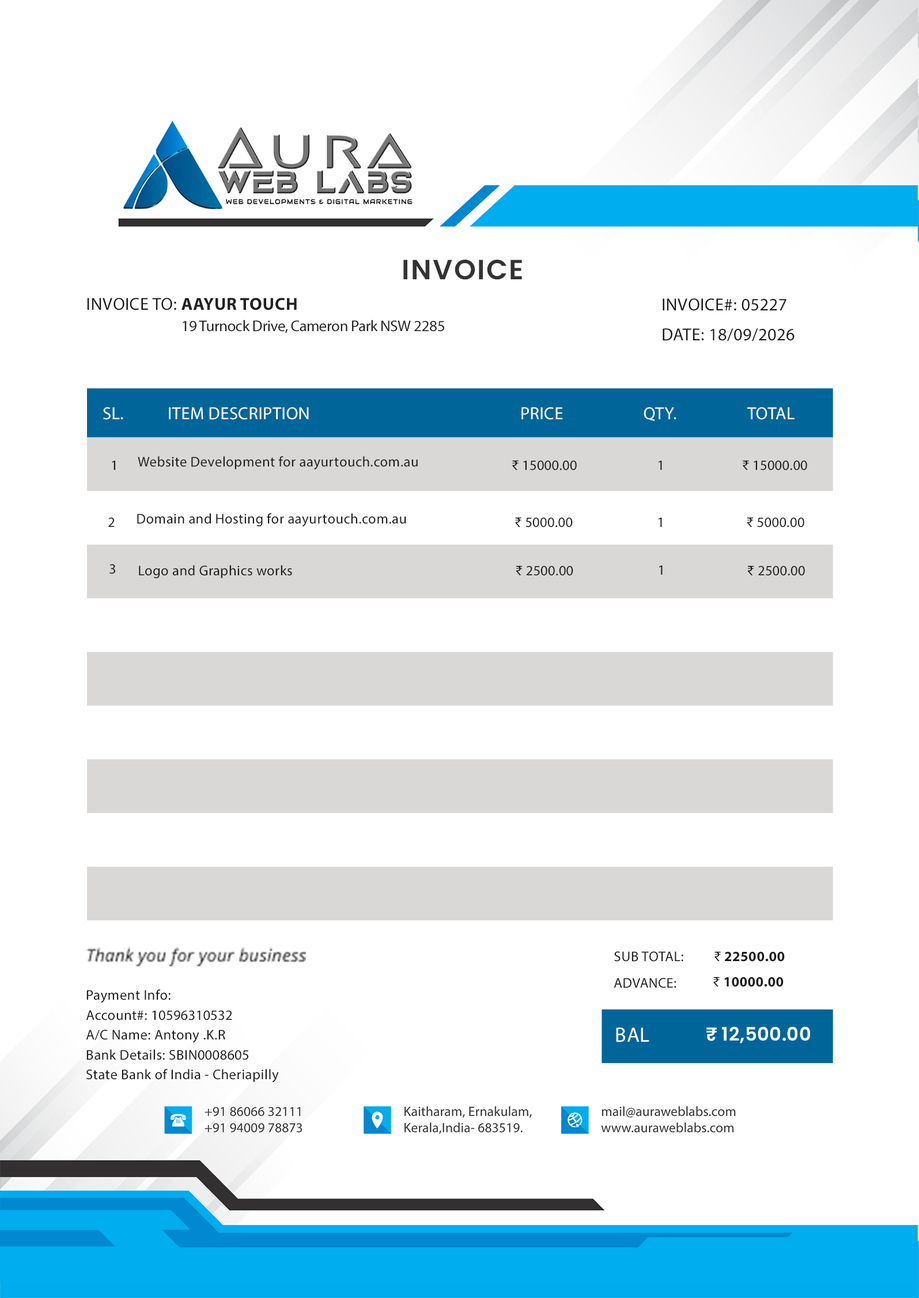
<style>
.page{position:relative;width:919px;height:1298px;background:#ffffff}
.page>*{position:absolute;margin:0}
.t1{font:27.8px "Poppins-SemiBold";letter-spacing:0.05em;color:#333333;text-transform:uppercase}
.t2{font:17.5px "MyriadPro-Regular";letter-spacing:0.02em;color:#1c1c1c;text-transform:uppercase}
.t3{font:17.5px "MyriadPro-Bold";letter-spacing:0.02em;color:#222222;text-transform:uppercase}
.t4{font:17.5px/29.7px "MyriadPro-Regular";letter-spacing:0.02em;color:#1c1c1c;text-transform:uppercase}
.t5{font:15.6px "MyriadPro-Regular";letter-spacing:-0.02em;color:#222222}
.t6{font:17.5px "MyriadPro-Regular";letter-spacing:0.02em;color:#ffffff;text-transform:uppercase}
.t7{font:14.2px "MyriadPro-Regular";letter-spacing:0.02em;color:#1c1c1c;text-transform:uppercase}
.t8{font:14.2px "MyriadPro-Regular";letter-spacing:0.02em;color:#1c1c1c}
.t9{font:14.2px "MyriadPro-Regular";color:#000000}
.t10{font:17px "OpenSans-Italic";letter-spacing:0.02em;color:#282828}
.t11{font:14.2px "MyriadPro-Bold";letter-spacing:0.02em;color:#1c1c1c;text-transform:uppercase}
.t12{font:14.2px/19.8px "MyriadPro-Regular";letter-spacing:0.02em;color:#1c1c1c}
.t13{font:20.7px "MyriadPro-Regular";letter-spacing:0.02em;color:#ffffff;text-transform:uppercase}
.t14{font:18.5px "Poppins-SemiBold";letter-spacing:0.02em;color:#ffffff;text-transform:uppercase}
.t15{font:18.5px "Poppins-SemiBold";color:#ffffff}
</style>
<div class="page">
<p class="t1" style="left:403px;top:259px;width:119px;height:21px">Invoice</p>
<p class="t2" style="left:87px;top:298px;width:210px;height:12px">Invoice to: <span class="t3">Aayur Touch</span></p>
<p class="t4" style="left:662px;top:298px;width:132px;height:44px">Invoice#: 05227<br>Date: 18/09/2026</p>
<p class="t5" style="left:183px;top:320px;width:261px;height:13px">19 Turnock Drive, Cameron Park NSW 2285</p>
<p class="t6" style="left:103px;top:407px;width:20px;height:13px">Sl.</p>
<p class="t6" style="left:169px;top:407px;width:140px;height:13px">Item Description</p>
<p class="t6" style="left:521px;top:407px;width:42px;height:13px">Price</p>
<p class="t6" style="left:643px;top:407px;width:33px;height:14px">Qty.</p>
<p class="t6" style="left:747px;top:407px;width:47px;height:13px">Total</p>
<p class="t7" style="left:112px;top:461px;width:3px;height:9px">1</p>
<p class="t8" style="left:138px;top:456px;width:280px;height:14px">Website Development for aayurtouch.com.au</p>
<p class="t7" style="left:512px;top:460px;width:64px;height:11px"><span class="t9">₹</span> 15000.00</p>
<p class="t7" style="left:658px;top:461px;width:4px;height:9px">1</p>
<p class="t7" style="left:742px;top:460px;width:65px;height:11px"><span class="t9">₹</span> 15000.00</p>
<p class="t7" style="left:108px;top:517px;width:7px;height:10px">2</p>
<p class="t8" style="left:137px;top:513px;width:269px;height:14px">Domain and Hosting for aayurtouch.com.au</p>
<p class="t7" style="left:515px;top:517px;width:57px;height:11px"><span class="t9">₹</span> 5000.00</p>
<p class="t7" style="left:658px;top:518px;width:4px;height:9px">1</p>
<p class="t7" style="left:747px;top:517px;width:57px;height:11px"><span class="t9">₹</span> 5000.00</p>
<p class="t7" style="left:109px;top:564px;width:6px;height:10px">3</p>
<p class="t8" style="left:139px;top:565px;width:153px;height:13px">Logo and Graphics works</p>
<p class="t7" style="left:516px;top:566px;width:57px;height:10px"><span class="t9">₹</span> 2500.00</p>
<p class="t7" style="left:659px;top:566px;width:3px;height:9px">1</p>
<p class="t7" style="left:748px;top:566px;width:57px;height:10px"><span class="t9">₹</span> 2500.00</p>
<p class="t10" style="left:86px;top:947px;width:220px;height:19px">Thank you for your business</p>
<p class="t7" style="left:614px;top:951px;width:69px;height:11px">Sub Total:</p>
<p class="t11" style="left:714px;top:951px;width:70px;height:11px"><span class="t9">₹ </span>22500.00</p>
<p class="t7" style="left:613px;top:978px;width:63px;height:10px">ADVANCE:</p>
<p class="t11" style="left:713px;top:977px;width:70px;height:10px"><span class="t9">₹ </span>10000.00</p>
<p class="t12" style="left:86px;top:989px;width:193px;height:94px">Payment Info:<br>Account#: 10596310532<br>A/C Name: Antony .K.R<br>Bank Details: SBIN0008605<br>State Bank of India - Cheriapilly</p>
<p class="t13" style="left:616px;top:1027px;width:33px;height:15px">BAL</p>
<p class="t14" style="left:706px;top:1027px;width:104px;height:17px"><span class="t15">₹</span> 12,500.00</p>
</div>
